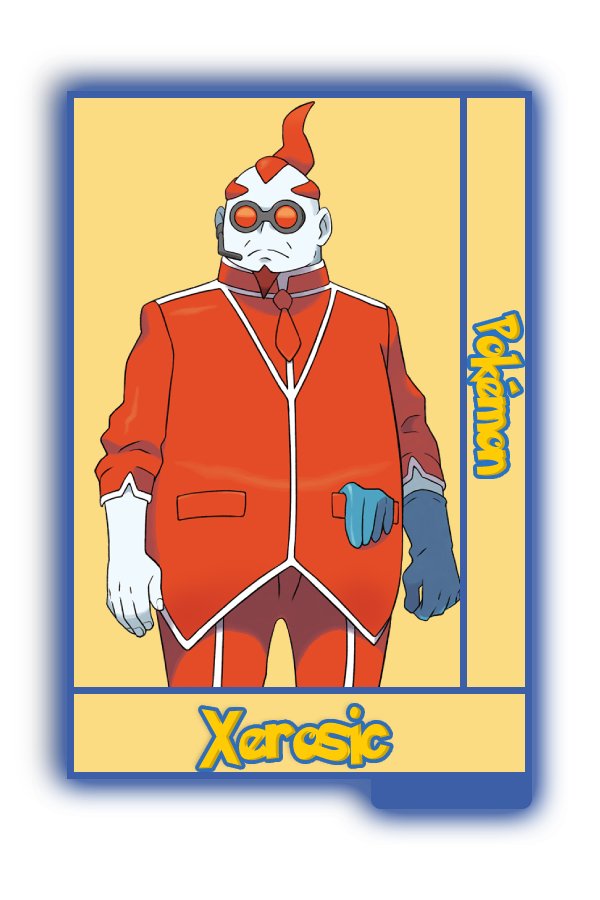
<style>
.page{position:relative;width:600px;height:900px;background:#fbdc83}
.page>*{position:absolute;margin:0}
.t1{font:48.8px "PokemonSolidNormal";color:#ffcb05;scale:0.8 1}
.t2{font:56.6px "PokemonSolidNormal";color:#ffcb05;scale:0.92 1}
</style>
<div class="page">
<p class="t1" style="left:469px;top:313px;width:54px;height:163px;rotate:90deg">Pokémon</p>
<p class="t2" style="left:198px;top:706px;width:192px;height:63px">Xerosic</p>
</div>
